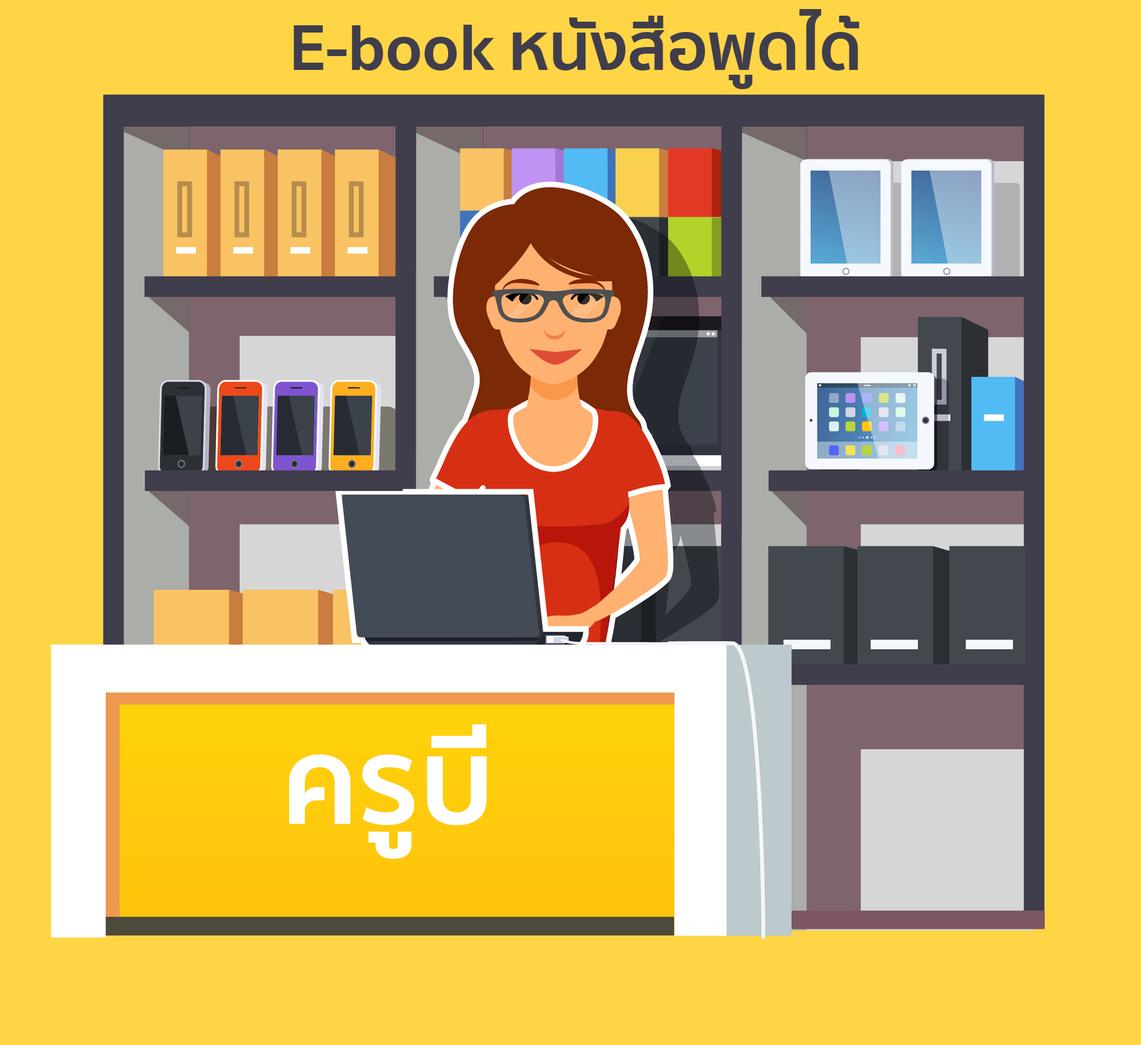
<style>
.page{position:relative;width:1141px;height:1045px;background:#ffd545}
.page>*{position:absolute;margin:0}
.t1{font:66.3px "SukhumvitSet-Bold";color:#403e4c}
.t2{font:120.5px "SukhumvitSet-Bold";color:#ffffff}
</style>
<div class="page">
<p class="t1" style="left:293px;top:9px;width:567px;height:80px">E-book หนังสือพูดได้</p>
<p class="t2" style="left:289px;top:724px;width:198px;height:135px">ครูบี</p>
</div>
